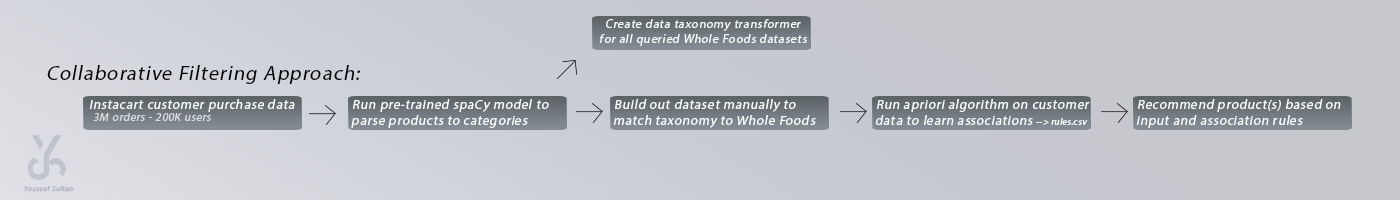
<style>
.page{position:relative;width:1400px;height:200px}
.page>*{position:absolute;margin:0}
.t1{font:12.3px "MyriadPro-Regular";letter-spacing:0.05em;color:#ffffff;font-style:italic}
.t2{font:20.5px "MyriadPro-Regular";letter-spacing:0.05em;color:#000000;font-style:italic}
.t3{font:13.3px "MyriadPro-Regular";letter-spacing:0.05em;color:#ffffff;font-style:italic}
.t4{font:9px "MyriadPro-Regular";letter-spacing:0.05em;color:#ffffff;font-style:italic}
.t5{font:11.3px "MyriadPro-Regular";letter-spacing:0.05em;color:#d8dadc;font-style:italic}
.t6{font:7.2px "Candara";letter-spacing:0.05em;color:#aaafb9;font-style:italic}
</style>
<div class="page">
<p class="t1" style="left:600px;top:19px;width:208px;height:27px;text-align:center">Create data taxonomy transformer for all queried Whole Foods datasets</p>
<p class="t2" style="left:47px;top:65px;width:313px;height:19px">Collaborative Filtering Approach:</p>
<p class="t3" style="left:90px;top:99px;width:205px;height:13px">Instacart customer purchase data</p>
<p class="t3" style="left:351px;top:99px;width:198px;height:29px">Run pre-trained spaCy model to parse products to categories</p>
<p class="t3" style="left:613px;top:99px;width:203px;height:29px">Build out dataset manually to match taxonomy to Whole Foods</p>
<p class="t3" style="left:875px;top:99px;width:215px;height:26px">Run apriori algorithm on customer data to learn associations <span class="t4">--&gt; rules.csv</span></p>
<p class="t3" style="left:1136px;top:99px;width:205px;height:29px">Recommend product(s) based on input and association rules</p>
<p class="t5" style="left:93px;top:113px;width:118px;height:8px">3M orders - 200K users</p>
<p class="t6" style="left:24px;top:185px;width:49px;height:7px">Youssef Sultan</p>
</div>
